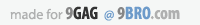
<style>
.page{position:relative;width:200px;height:25px;background:#f5f7f6}
.page>*{position:absolute;margin:0}
.t1{font:14px "MyriadPro-Regular";color:#afb0b0}
.t2{font:18px "MyriadPro-BoldCond";color:#868686}
.t3{font:18px "MyriadPro-BoldCond";color:#333333}
.t4{font:14px "MyriadPro-Regular";color:#6d9bca}
.t5{font:18px "MyriadPro-BoldCond";color:#6d9bca}
.t6{font:18px "MyriadPro-BoldCond";color:#afb0b0}
</style>
<div class="page">
<p class="t1" style="left:10px;top:6px;width:170px;height:15px">made for <span class="t2">9</span><span class="t3">GAG </span><span class="t4"> @ </span><span class="t2">9</span><span class="t5">BRO</span><span class="t6">.com</span></p>
</div>
